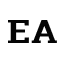
<style>
.page{position:relative;width:64px;height:64px;background:#ffffff}
.page>*{position:absolute;margin:0}
.t1{font:32.9px "RobotoSlab-Bold";color:#050505;scale:1.12 1}
</style>
<div class="page">
<p class="t1" style="left:8px;top:20px;width:49px;height:23px">EA</p>
</div>
